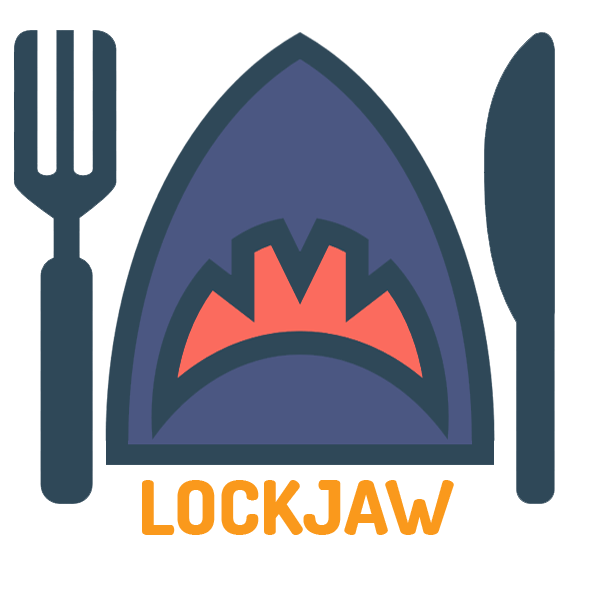
<style>
.page{position:relative;width:600px;height:600px;background:#ffffff}
.page>*{position:absolute;margin:0}
.t1{font:75px "Dosis-ExtraBold";color:#fa991c}
</style>
<div class="page">
<p class="t1" style="left:142px;top:480px;width:312px;height:55px">LOCKJAW</p>
</div>
